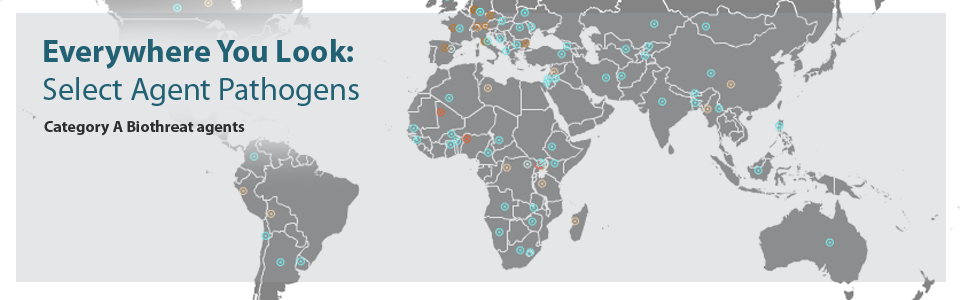
<style>
.page{position:relative;width:960px;height:300px;background:#e5e6e7}
.page>*{position:absolute;margin:0}
.t1{font:32px "MyriadPro-Regular";color:#226074}
.t2{font:32px "MyriadPro-Bold";color:#226074}
.t3{font:16px "MyriadPro-Bold";color:#2d2e2f}
</style>
<div class="page">
<p class="t1" style="left:43px;top:39px;width:316px;height:67px"><span class="t2">Everywhere You Look: </span>Select Agent Pathogens</p>
<p class="t3" style="left:44px;top:120px;width:201px;height:16px">Category A Biothreat agents</p>
</div>
